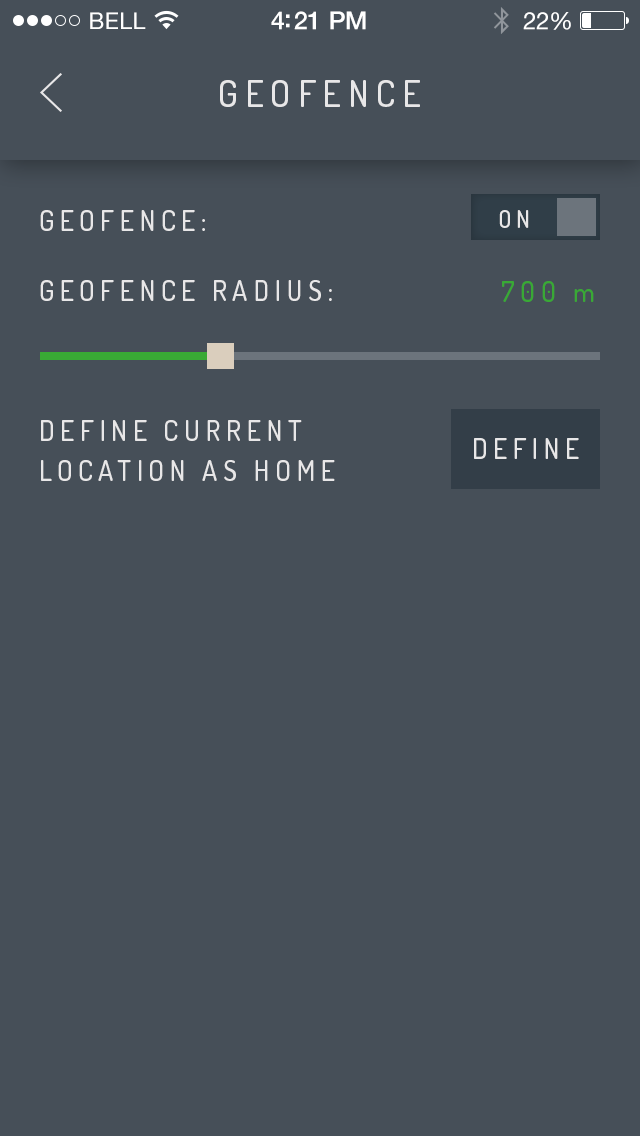
<style>
.page{position:relative;width:640px;height:1136px;background:#464f58}
.page>*{position:absolute;margin:0}
.t1{font:23px "HelveticaNeue";letter-spacing:0.02em;color:#ffffff}
.t2{font:25px "HelveticaNeue-Medium";letter-spacing:-0.02em;color:#ffffff}
.t3{font:24px "HelveticaNeue";letter-spacing:-0.02em;color:#ffffff}
.t4{font:36px "Dosis-Medium";letter-spacing:0.2em;color:#e8e7e8}
.t5{font:28px/70px "Dosis-Medium";letter-spacing:0.2em;color:#e8e7e8}
.t6{font:28px/40px "Dosis-Medium";letter-spacing:0.2em;color:#e8e7e8}
.t7{font:24px "Dosis-Medium";letter-spacing:0.2em;color:#e8e7e8}
.t8{font:28px "Dosis-Medium";letter-spacing:0.2em;color:#39a935}
.t9{font:28px/106.2px "Dosis-Medium";letter-spacing:0.2em;color:#e8e7e8}
.t10{font:25.3px/106.2px "DINPro-Medium";letter-spacing:0.2em;color:#e8e7e8}
</style>
<div class="page">
<p class="t1" style="left:90px;top:12px;width:56px;height:17px">BELL</p>
<p class="t2" style="left:271px;top:11px;width:95px;height:19px">4:21 PM</p>
<p class="t3" style="left:523px;top:12px;width:48px;height:18px">22%</p>
<p class="t4" style="left:220px;top:80px;width:200px;height:27px">GEOFENCE</p>
<p class="t5" style="left:40px;top:210px;width:295px;height:271px">GEOFENCE:<br>GEOFENCE RADIUS:<br><br>DEFINE CURRENT <br><span class="t6">LOCATION AS HOME</span></p>
<p class="t7" style="left:499px;top:210px;width:30px;height:18px">ON</p>
<p class="t8" style="left:502px;top:281px;width:92px;height:21px">700 m</p>
<p class="t9" style="left:474px;top:438px;width:105px;height:21px;text-align:center">DEFINE<br><span class="t10">ISCH</span></p>
</div>
